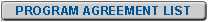
<style>
.page{position:relative;width:208px;height:22px;background:#cccccc}
.page>*{position:absolute;margin:0}
.t1{font:12px "Arial-BoldMT";letter-spacing:0.06em;color:#005596}
</style>
<div class="page">
<p class="t1" style="left:16px;top:6px;width:174px;height:9px">PROGRAM AGREEMENT LIST</p>
</div>
